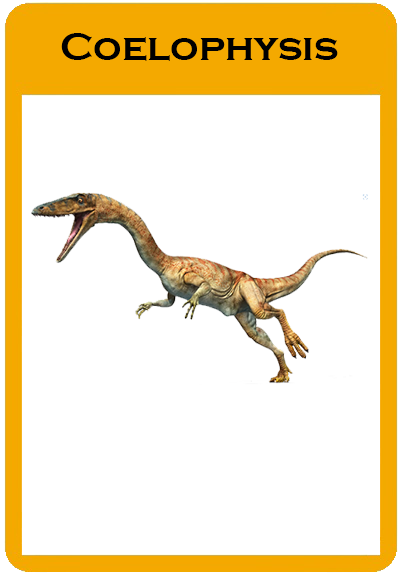
<style>
.page{position:relative;width:400px;height:575px;background:#ffffff}
.page>*{position:absolute;margin:0}
.t1{font:40px "CopperplateGothic-Bold";color:#000000}
</style>
<div class="page">
<p class="t1" style="left:61px;top:33px;width:277px;height:28px">Coelophysis</p>
</div>
